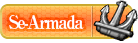
<style>
.page{position:relative;width:138px;height:43px;background:#ffffff}
.page>*{position:absolute;margin:0}
.t1{font:18px "RyuminPro-ExBold";letter-spacing:-0.08em;color:#ffffff;scale:0.9 1}
</style>
<div class="page">
<p class="t1" style="left:9px;top:15px;width:75px;height:14px">Se-Armada</p>
</div>
